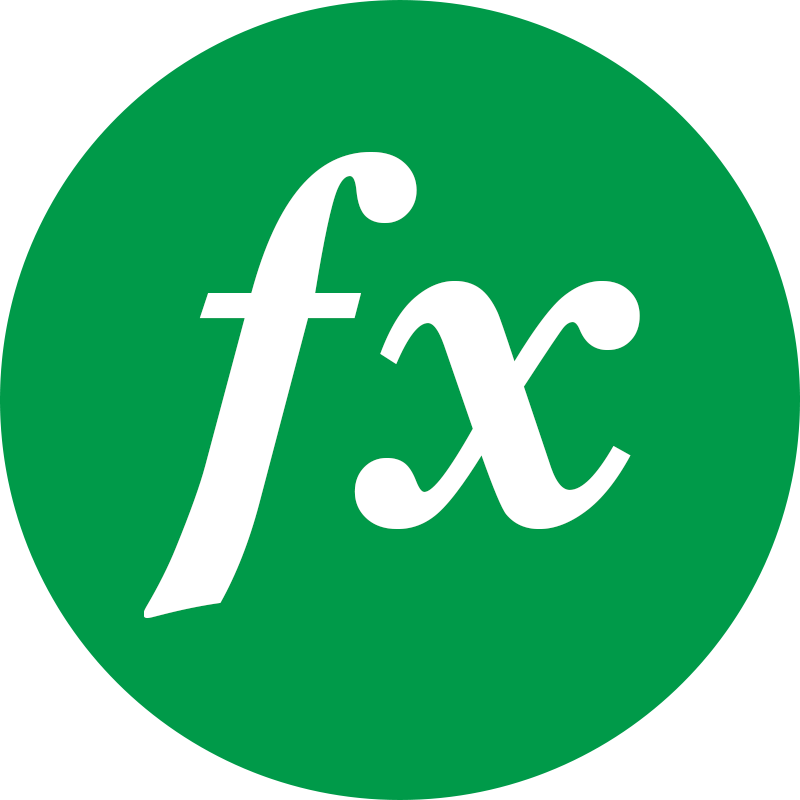
<style>
.page{position:relative;width:800px;height:800px;background:#009a49}
.page>*{position:absolute;margin:0}
.t1{font:500px "CenturySchoolbook-BoldItalic";color:#ffffff}
</style>
<div class="page">
<p class="t1" style="left:144px;top:152px;width:496px;height:466px">fx</p>
</div>
